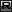
<style>
.page{position:relative;width:12px;height:12px;background:#1b1b1b}
.page>*{position:absolute;margin:0}
.t1{font:24px "BankGothicBold";letter-spacing:0.025em;color:#050505;text-transform:uppercase}
</style>
<div class="page">
<p class="t1" style="left:2px;top:1px;width:9px;height:9px">R</p>
</div>
